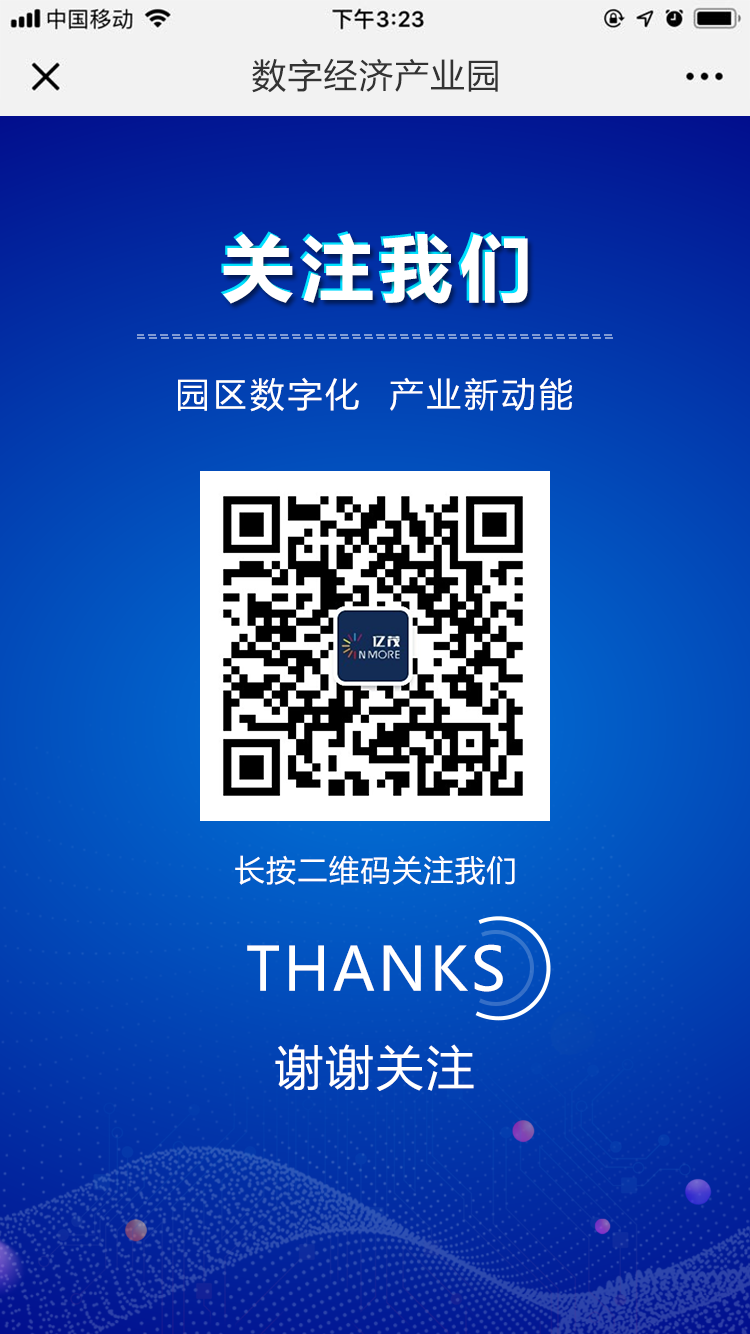
<style>
.page{position:relative;width:750px;height:1334px}
.page>*{position:absolute;margin:0}
.t1{font:34px "MicrosoftYaHei";letter-spacing:0.05em;color:#333333}
.t2{font:72px "MicrosoftYaHei-Bold";letter-spacing:0.1em;color:#ffffff}
.t3{font:34px "MicrosoftYaHei";letter-spacing:0.1em;color:#ffffff}
.t4{font:30px "MicrosoftYaHei";letter-spacing:0.05em;color:#ffffff}
.t5{font:60px "MicrosoftYaHei";letter-spacing:0.05em;color:#ffffff}
.t6{font:48px "MicrosoftYaHei";letter-spacing:0.05em;color:#ffffff}
</style>
<div class="page">
<p class="t1" style="left:252px;top:58px;width:246px;height:35px">数字经济产业园</p>
<p class="t2" style="left:220px;top:231px;width:305px;height:71px">关注我们</p>
<p class="t2" style="left:223px;top:233px;width:305px;height:71px">关注我们</p>
<p class="t3" style="left:178px;top:377px;width:394px;height:35px">园区数字化  产业新动能</p>
<p class="t4" style="left:235px;top:855px;width:280px;height:30px">长按二维码关注我们</p>
<p class="t5" style="left:247px;top:944px;width:256px;height:48px">THANKS</p>
<p class="t6" style="left:275px;top:1044px;width:199px;height:47px">谢谢关注</p>
</div>
